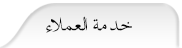
<style>
.page{position:relative;width:182px;height:48px}
.page>*{position:absolute;margin:0}
.t1{font:26px "TraditionalArabic";letter-spacing:-0.08em;color:#050505}
</style>
<div class="page">
<p class="t1" style="left:46px;top:16px;width:86px;height:17px">خد  مة   العملاء</p>
</div>
